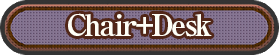
<style>
.page{position:relative;width:279px;height:55px}
.page>*{position:absolute;margin:0}
.t1{font:30px "RyuminPro-ExBold";letter-spacing:-0.08em;color:#fffff7}
</style>
<div class="page">
<p class="t1" style="left:68px;top:13px;width:144px;height:24px">Chair+Desk</p>
</div>
